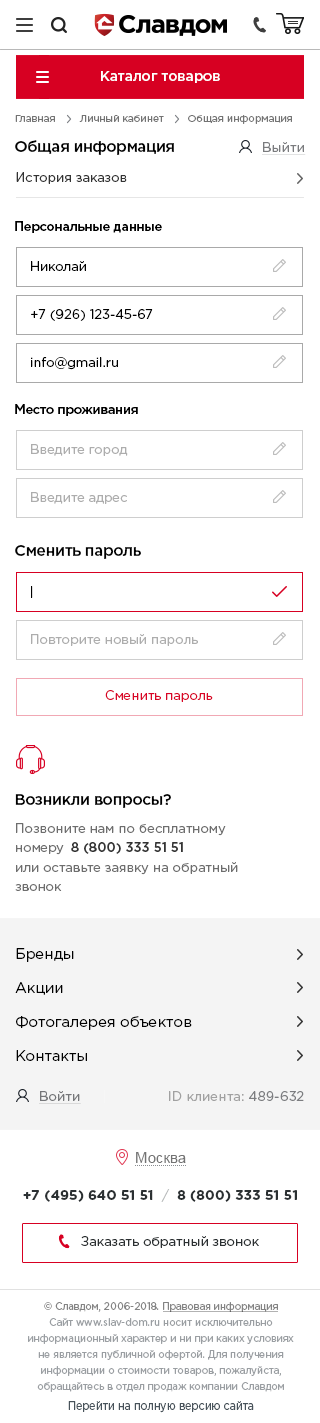
<style>
.page{position:relative;width:320px;height:1423px;background:#ffffff}
.page>*{position:absolute;margin:0}
.t1{font:14px "GothamPro-Medium";color:#ffffff}
.t2{font:10px "GothamPro";color:#737373}
.t3{font:15.8px "GothamPro-Medium";letter-spacing:-0.025em;color:#000000}
.t4{font:13px "GothamPro";letter-spacing:0.015em;color:#7a7b7e;text-decoration:underline}
.t5{font:13px "GothamPro";color:#333333}
.t6{font:13px "GothamPro-Medium";letter-spacing:-0.025em;color:#000000}
.t7{font:13px "GothamPro";color:#000000}
.t8{font:13px "GothamPro";color:#adadad}
.t9{font:13px "GothamPro";color:#d90527}
.t10{font:15.7px "GothamPro-Medium";letter-spacing:-0.025em;color:#000000}
.t11{font:13px/19px "GothamPro";color:#6e6e6e}
.t12{font:13px "GothamPro-Medium";color:#333333}
.t13{font:15px/34px "GothamPro";color:#000000}
.t14{font:13px "GothamPro";letter-spacing:0.015em;color:#757679;text-decoration:underline}
.t15{font:13px "GothamPro";letter-spacing:0.015em}
.t16{font:15px "ArialMT";color:#737373}
.t17{font:13.8px "GothamPro-Bold";color:#2b3032}
.t18{font:13.8px "GothamPro-Light";color:#b4b7b8}
.t19{font:13px "GothamPro";color:#2b3032}
.t20{font:11px/16px "GothamPro";color:#9a9ea2;scale:0.89 1}
.t21{font:12px "GothamPro";color:#48535b;scale:0.89 1}
</style>
<div class="page">
<p class="t1" style="left:101px;top:71px;width:119px;height:12px">Каталог товаров</p>
<p class="t2" style="left:15px;top:115px;width:277px;height:9px">Главная        Личный кабинет        Общая информация</p>
<p class="t3" style="left:15px;top:140px;width:159px;height:15px">Общая информация</p>
<p class="t4" style="left:262px;top:142px;width:44px;height:13px">Выйти</p>
<p class="t5" style="left:16px;top:172px;width:111px;height:12px">История заказов</p>
<p class="t6" style="left:15px;top:221px;width:147px;height:12px">Персональные данные</p>
<p class="t7" style="left:31px;top:261px;width:55px;height:10px">Николай</p>
<p class="t7" style="left:31px;top:309px;width:122px;height:12px">+7 (926) 123-45-67</p>
<p class="t7" style="left:31px;top:357px;width:87px;height:13px">info@gmail.ru</p>
<p class="t6" style="left:15px;top:404px;width:123px;height:12px">Место проживания</p>
<p class="t8" style="left:31px;top:444px;width:97px;height:12px">Введите город</p>
<p class="t8" style="left:31px;top:492px;width:96px;height:12px">Введите адрес</p>
<p class="t3" style="left:15px;top:545px;width:126px;height:14px">Сменить пароль</p>
<p class="t7" style="left:31px;top:586px;width:2px;height:12px">|</p>
<p class="t8" style="left:31px;top:634px;width:167px;height:12px">Повторите новый пароль</p>
<p class="t9" style="left:105px;top:690px;width:108px;height:12px">Сменить пароль</p>
<p class="t10" style="left:15px;top:794px;width:156px;height:14px">Возникли вопросы?</p>
<p class="t11" style="left:16px;top:823px;width:210px;height:32px">Позвоните нам по бесплатному <br>номеру</p>
<p class="t12" style="left:71px;top:842px;width:112px;height:12px">8 (800) 333 51 51</p>
<p class="t11" style="left:15px;top:862px;width:223px;height:29px">или оставьте заявку на обратный <br>звонок</p>
<p class="t13" style="left:15px;top:948px;width:177px;height:113px">Бренды           <br>Акции           <br>Фотогалерея объектов<br>Контакты</p>
<p class="t14" style="left:39px;top:1091px;width:42px;height:13px">Войти</p>
<p class="t15" style="left:169px;top:1091px;width:135px;height:10px">ID клиента: 489-632</p>
<p class="t16" style="left:136px;top:1152px;width:50px;height:11px">Москва</p>
<p class="t17" style="left:23px;top:1189px;width:274px;height:13px">+7 (495) 640 51 51  <span class="t18">/</span>  8 (800) 333 51 51</p>
<p class="t19" style="left:81px;top:1236px;width:178px;height:12px">Заказать обратный звонок</p>
<p class="t20" style="left:28px;top:1302px;width:266px;height:90px;text-align:center">© Славдом, 2006-2018. Правовая информация<br>Сайт www.slav-dom.ru носит исключительно<br>информационный характер и ни при каких условиях<br>не является публичной офертой. Для получения<br>информации о стоимости товаров, пожалуйста,<br>обращайтесь в отдел продаж компании Славдом</p>
<p class="t21" style="left:68px;top:1401px;width:186px;height:12px">Перейти на полную версию сайта</p>
</div>
